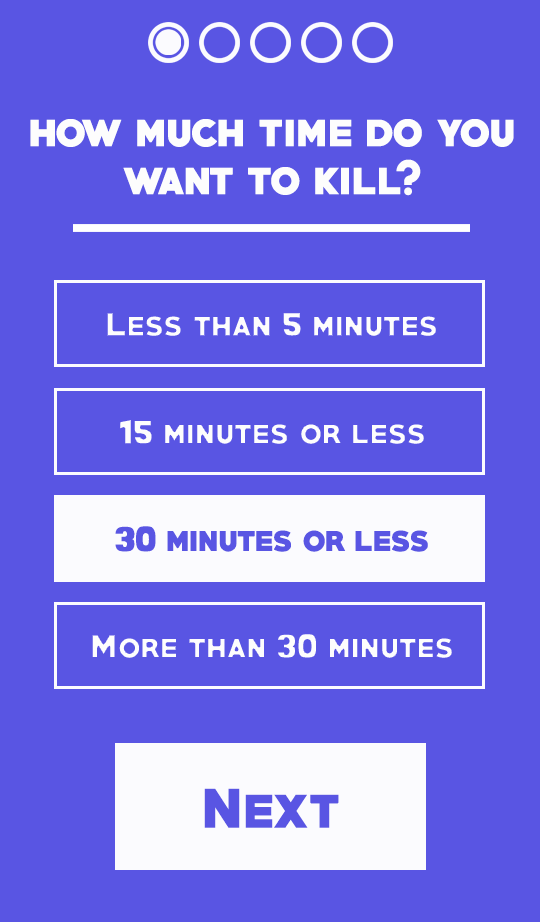
<style>
.page{position:relative;width:540px;height:922px;background:#5955e3}
.page>*{position:absolute;margin:0}
.t1{font:40px "PRIMETIME-Regular";color:#fdfdfd}
.t2{font:30px "PRIMETIME-Regular";color:#fdfdfd}
.t3{font:30px "CFGoliathDemo-Regular";color:#fdfdfd}
.t4{font:30px "PRIMETIME-Regular";color:#5955e3}
.t5{font:30px "CFGoliathDemo-Regular";color:#5955e3}
.t6{font:50px "PRIMETIME-Regular";color:#5955e3}
</style>
<div class="page">
<p class="t1" style="left:30px;top:119px;width:484px;height:77px;text-align:center">how much time do you want to kill?</p>
<p class="t2" style="left:106px;top:312px;width:331px;height:25px">Less than <span class="t3">5</span> minutes</p>
<p class="t2" style="left:119px;top:419px;width:306px;height:26px"><span class="t3">15</span> minutes or less</p>
<p class="t4" style="left:115px;top:526px;width:313px;height:26px"><span class="t5">30</span> minutes or less</p>
<p class="t4" style="left:115px;top:526px;width:313px;height:26px"><span class="t5">30</span> minutes or less</p>
<p class="t2" style="left:91px;top:633px;width:362px;height:26px">More than <span class="t3">30</span> minutes</p>
<p class="t6" style="left:204px;top:788px;width:135px;height:40px">Next</p>
</div>
